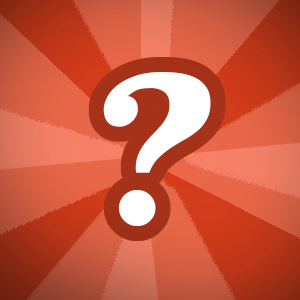
<style>
.page{position:relative;width:300px;height:300px}
.page>*{position:absolute;margin:0}
.t1{font:200px "Superclarendon-BoldItalic";color:#ffffff}
</style>
<div class="page">
<p class="t1" style="left:103px;top:72px;width:108px;height:154px">?</p>
</div>
